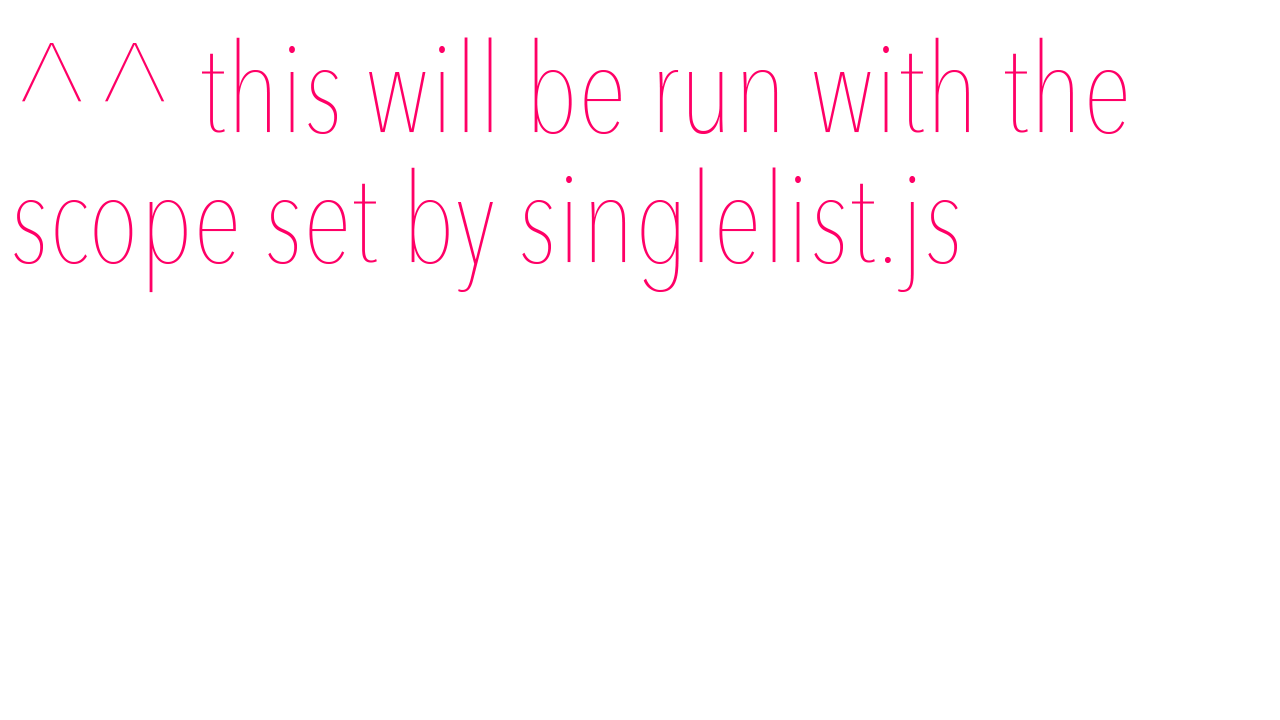
<style>
.page{position:relative;width:1280px;height:720px;background:#ffffff}
.page>*{position:absolute;margin:0}
.t1{font:125px "AvenirNextCondensed-UltraLight";color:#ff0066}
</style>
<div class="page">
<p class="t1" style="left:14px;top:37px;width:1112px;height:256px">^^ this will be run with the <br>scope set by singlelist.js</p>
</div>
